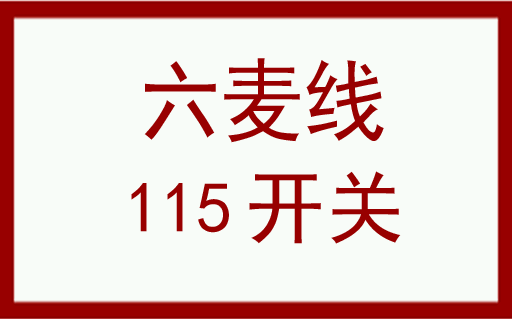
<style>
.page{position:relative;width:512px;height:319px;background:#f8fcf8}
.page>*{position:absolute;margin:0}
.t1{font:90.7px "SimHei";color:#980000;scale:0.91 1}
.t2{font:80.2px "SimHei";color:#980000}
.t3{font:72px "SimHei";color:#980000}
</style>
<div class="page">
<p class="t1" style="left:144px;top:58px;width:240px;height:85px">六麦线</p>
<p class="t2" style="left:249px;top:171px;width:152px;height:73px">开关</p>
<p class="t3" style="left:131px;top:183px;width:98px;height:50px">115</p>
</div>
